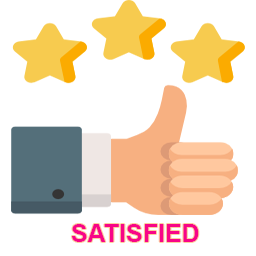
<style>
.page{position:relative;width:256px;height:256px;background:#ffffff}
.page>*{position:absolute;margin:0}
.t1{font:25px "Arial-BoldMT";color:#f80588}
</style>
<div class="page">
<p class="t1" style="left:71px;top:224px;width:128px;height:18px">SATISFIED</p>
</div>
